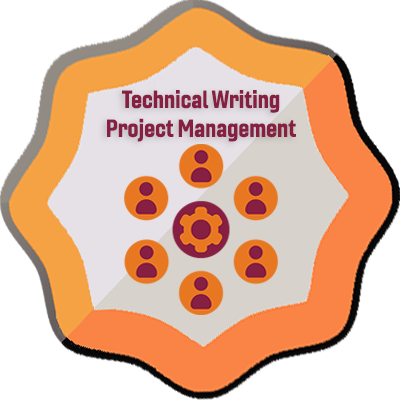
<style>
.page{position:relative;width:400px;height:400px;background:#ffffff}
.page>*{position:absolute;margin:0}
.t1{font:24px "Gineso-ConBol";color:#861f41}
</style>
<div class="page">
<p class="t1" style="left:107px;top:90px;width:189px;height:52px;text-align:center">Technical Writing<br>Project Management</p>
</div>
